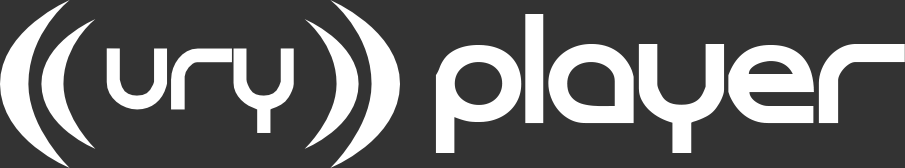
<style>
.page{position:relative;width:905px;height:168px;background:#333333}
.page>*{position:absolute;margin:0}
.t1{font:110.3px "roundabout";color:#ffffff;scale:1.09 1}
</style>
<div class="page">
<p class="t1" style="left:435px;top:14px;width:470px;height:139px">player</p>
</div>
